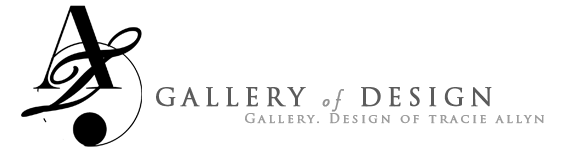
<style>
.page{position:relative;width:566px;height:150px;background:#ffffff}
.page>*{position:absolute;margin:0}
.t1{font:24.4px "TrajanPro-Regular";letter-spacing:0.2em;color:#5b5b5b;font-weight:bold}
.t2{font:24.4px "SavoyeLetPlain";letter-spacing:0.2em;color:#939393;font-weight:bold}
.t3{font:12.2px "TrajanPro-Regular";letter-spacing:0.2em;color:#9d9d9d;font-weight:bold}
</style>
<div class="page">
<p class="t1" style="left:156px;top:86px;width:336px;height:26px">GALLERY <span class="t2">of</span> DESIGN</p>
<p class="t3" style="left:245px;top:113px;width:299px;height:11px">Gallery. Design of tracie allyn</p>
</div>
